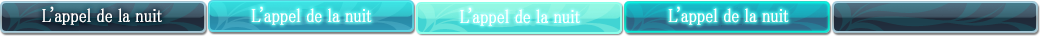
<style>
.page{position:relative;width:1040px;height:37px}
.page>*{position:absolute;margin:0}
.t1{font:19px "MS-PMincho";color:#ffffff;font-weight:bold;scale:0.84 1}
</style>
<div class="page">
<p class="t1" style="left:42px;top:6px;width:120px;height:19px">L’appel de la nuit</p>
<p class="t1" style="left:251px;top:6px;width:121px;height:19px">L’appel de la nuit</p>
<p class="t1" style="left:668px;top:6px;width:121px;height:19px">L’appel de la nuit</p>
<p class="t1" style="left:460px;top:7px;width:120px;height:19px">L’appel de la nuit</p>
</div>
